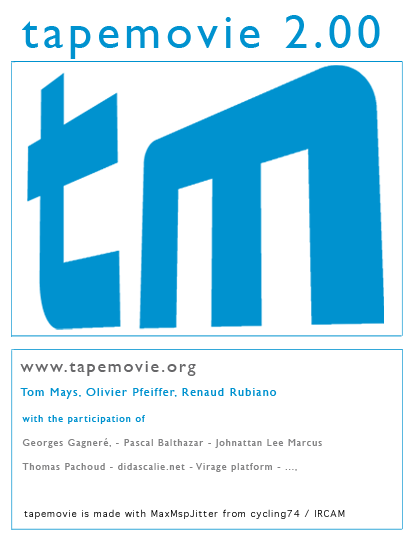
<style>
.page{position:relative;width:416px;height:540px;background:#ffffff}
.page>*{position:absolute;margin:0}
.t1{font:48px "GillSans";letter-spacing:0.1em;color:#0092cf}
.t2{font:12px/24px "GillSans";letter-spacing:0.1em;color:#0092cf}
.t3{font:18px/24px "GillSans";letter-spacing:0.1em;color:#676769}
.t4{font:10px/24px "GillSans";letter-spacing:0.1em;color:#838384}
.t5{font:10px/24px "GillSans";letter-spacing:0.1em;color:#0092cf}
.t6{font:9px "Geneva";letter-spacing:0.1em;color:#000000}
</style>
<div class="page">
<p class="t1" style="left:22px;top:15px;width:358px;height:44px">tapemovie 2.00</p>
<p class="t2" style="left:20px;top:361px;width:257px;height:38px;text-align:justify"><span class="t3">www.tapemovie.org<br></span>Tom Mays, Olivier Pfeiffer, Renaud Rubiano</p>
<p class="t4" style="left:22px;top:415px;width:300px;height:57px;text-align:justify"><span class="t5">with the participation of<br></span>Georges Gagneré, - Pascal Balthazar - Johnattan Lee Marcus <br>Thomas Pachoud - didascalie.net - Virage platform - ...,</p>
<p class="t6" style="left:24px;top:509px;width:321px;height:10px">tapemovie is made with MaxMspJitter from cycling74 / IRCAM</p>
</div>
